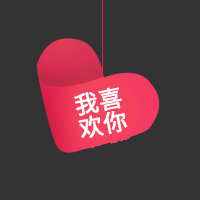
<style>
.page{position:relative;width:200px;height:200px;background:#333333}
.page>*{position:absolute;margin:0}
.t1{font:23.5px/23.5px "SourceHanSansCN-Regular";letter-spacing:0.02em;color:#ffffff;font-weight:bold}
</style>
<div class="page">
<p class="t1" style="left:74px;top:87px;width:54px;height:51px;rotate:-11deg">我喜<br>欢你</p>
</div>
